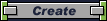
<style>
.page{position:relative;width:107px;height:21px;background:#a6a5a5}
.page>*{position:absolute;margin:0}
.t1{font:12px "Arial-BlackItalic";color:#1c2239}
</style>
<div class="page">
<p class="t1" style="left:33px;top:6px;width:43px;height:10px">Create</p>
</div>
